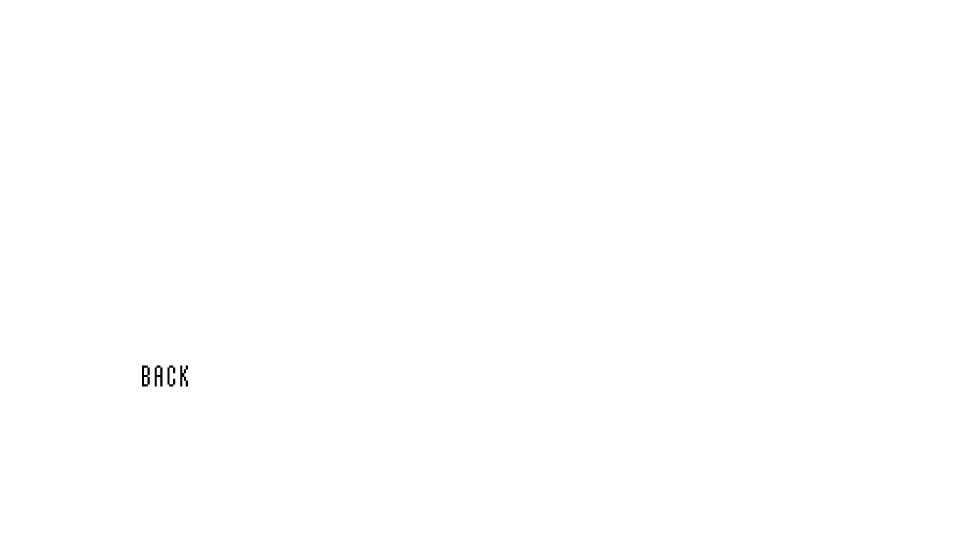
<style>
.page{position:relative;width:960px;height:540px;background:#ffffff}
.page>*{position:absolute;margin:0}
.t1{font:30px "ReturnOfGanonReg";letter-spacing:0.05em;color:#000000}
</style>
<div class="page">
<p class="t1" style="left:142px;top:365px;width:46px;height:22px">BACK</p>
</div>
